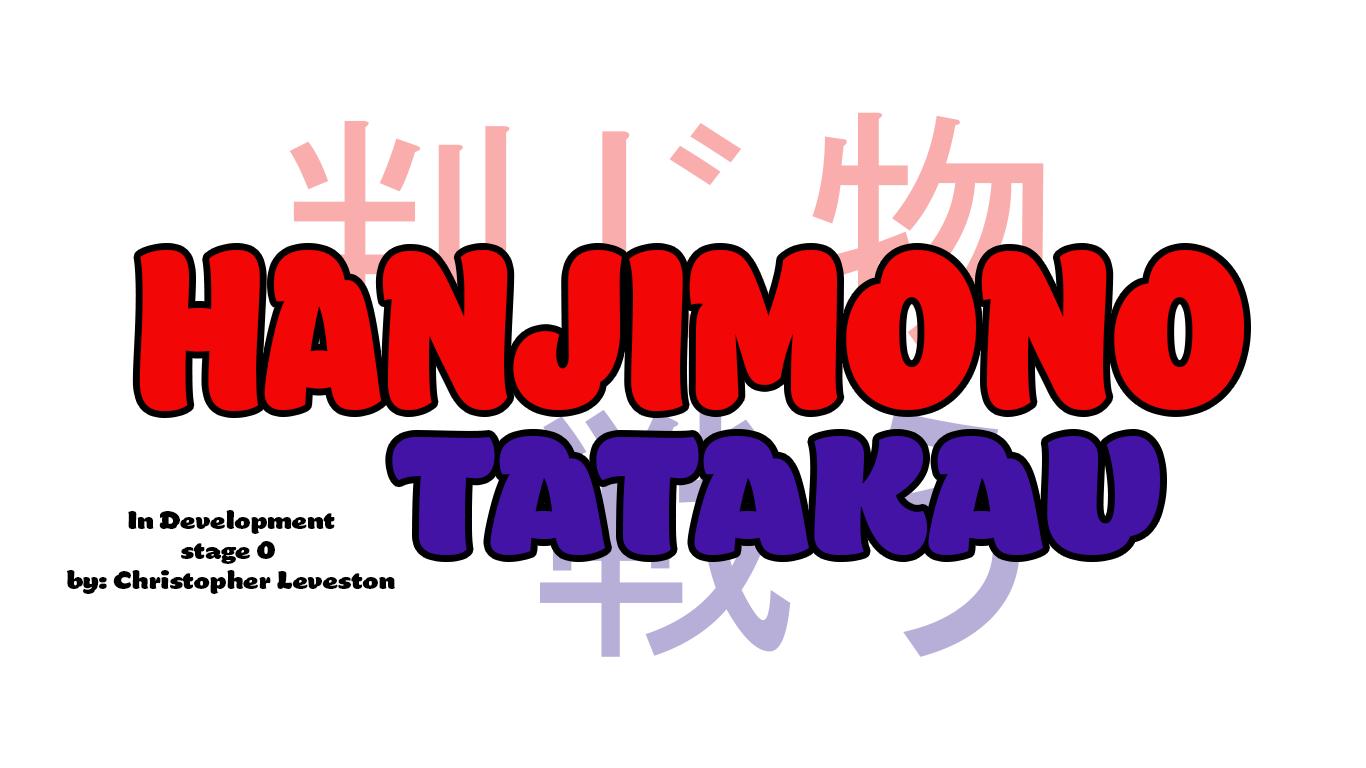
<style>
.page{position:relative;width:1366px;height:768px;background:#ffffff}
.page>*{position:absolute;margin:0}
.t1{font:107.2px "Manteiga-Gorda";color:#f20606;scale:0.72 1}
.t2{font:78.6px "Manteiga-Gorda";color:#4313a6;scale:0.96 1}
.t3{font:12px "Manteiga-Gorda";color:#000000}
</style>
<div class="page">
<p class="t1" style="left:139px;top:250px;width:1105px;height:161px">HANJIMONO</p>
<p class="t2" style="left:392px;top:436px;width:768px;height:119px">TATAKAU</p>
<p class="t3" style="left:66px;top:510px;width:329px;height:84px;text-align:center">In Development<br>stage 0 <br>by: Christopher Leveston</p>
</div>
